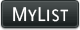
<style>
.page{position:relative;width:80px;height:30px}
.page>*{position:absolute;margin:0}
.t1{font:22px "Delicious-SmallCaps";color:#ffffff}
</style>
<div class="page">
<p class="t1" style="left:13px;top:7px;width:56px;height:15px">MyList</p>
</div>
